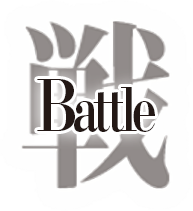
<style>
.page{position:relative;width:193px;height:211px;background:#fefefe}
.page>*{position:absolute;margin:0}
.t1{font:60px "KochoStd-Heavy";letter-spacing:-0.1em;color:#231815;scale:0.8 1}
.t2{font:70px "KochoStd-Heavy";letter-spacing:-0.1em;color:#231815;scale:0.8 1}
</style>
<div class="page">
<p class="t1" style="left:37px;top:79px;width:118px;height:53px"><span class="t2">B</span>attle</p>
</div>
